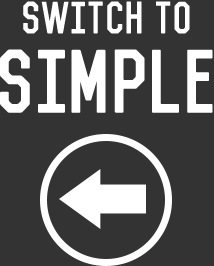
<style>
.page{position:relative;width:214px;height:266px;background:#333333}
.page>*{position:absolute;margin:0}
.t1{font:41.9px "Vincent-Regular";color:#ffffff}
.t2{font:83px "Vincent-Regular";color:#ffffff}
</style>
<div class="page">
<p class="t1" style="left:23px;top:1px;width:167px;height:33px">Switch to</p>
<p class="t2" style="left:0px;top:49px;width:213px;height:64px">SIMPLE</p>
</div>
